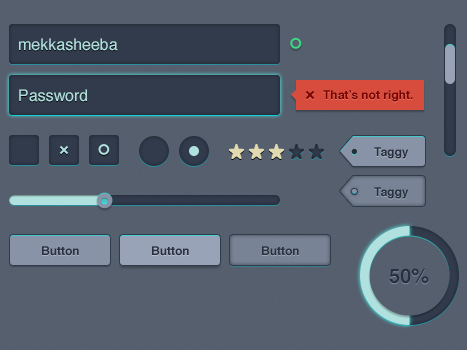
<style>
.page{position:relative;width:467px;height:350px;background:#555f6e}
.page>*{position:absolute;margin:0}
.t1{font:16px "Helvetica";color:#b0e1de}
.t2{font:12px "Helvetica-Bold";color:#8b0c0c}
.t3{font:12px "Helvetica-Bold";color:#28303f}
.t4{font:20px "Helvetica-Bold";color:#28303f}
</style>
<div class="page">
<p class="t1" style="left:19px;top:38px;width:99px;height:13px">mekkasheeba</p>
<p class="t1" style="left:19px;top:89px;width:68px;height:13px">Password</p>
<p class="t2" style="left:323px;top:90px;width:90px;height:12px">That’s not right.</p>
<p class="t3" style="left:374px;top:147px;width:35px;height:12px">Taggy</p>
<p class="t3" style="left:374px;top:187px;width:35px;height:12px">Taggy</p>
<p class="t3" style="left:42px;top:246px;width:37px;height:10px">Button</p>
<p class="t3" style="left:152px;top:246px;width:37px;height:10px">Button</p>
<p class="t3" style="left:262px;top:246px;width:37px;height:10px">Button</p>
<p class="t4" style="left:389px;top:268px;width:40px;height:16px">50%</p>
</div>
